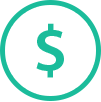
<style>
.page{position:relative;width:101px;height:102px;background:#ffffff}
.page>*{position:absolute;margin:0}
.t1{font:66px "MyriadPro-Semibold";color:#1bbc9b}
</style>
<div class="page">
<p class="t1" style="left:36px;top:23px;width:28px;height:55px">$</p>
</div>
